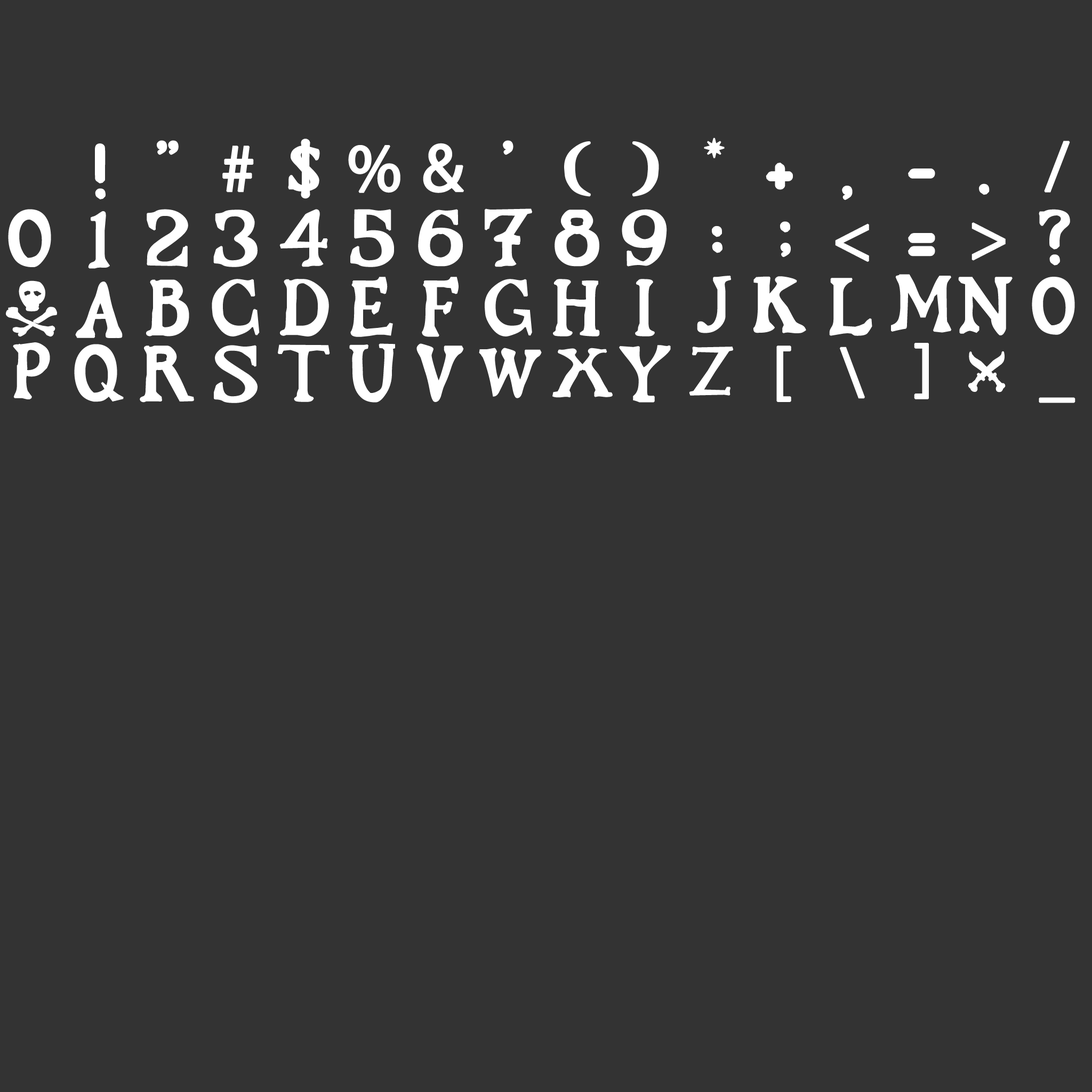
<style>
.page{position:relative;width:1092px;height:1092px;background:#333333}
.page>*{position:absolute;margin:0}
.t1{font:53.8px "Flibustier-Thin";color:#ffffff;font-weight:bold}
.t2{font:68.2px "Flibustier-Thin";color:#ffffff;font-weight:bold}
.t3{font:68.2px "MyriadPro-Regular";color:#ffffff;font-weight:bold}
.t4{font:58.7px "Flibustier-Thin";color:#ffffff;font-weight:bold}
</style>
<div class="page">
<p class="t1" style="left:704px;top:138px;width:21px;height:20px">*</p>
<p class="t2" style="left:95px;top:143px;width:11px;height:56px">!</p>
<p class="t2" style="left:157px;top:140px;width:22px;height:15px">"</p>
<p class="t3" style="left:222px;top:146px;width:32px;height:46px">#</p>
<p class="t2" style="left:288px;top:139px;width:32px;height:60px">$</p>
<p class="t3" style="left:348px;top:145px;width:52px;height:48px">%</p>
<p class="t3" style="left:423px;top:143px;width:41px;height:50px">&amp;</p>
<p class="t2" style="left:503px;top:140px;width:10px;height:15px">'</p>
<p class="t2" style="left:564px;top:141px;width:27px;height:56px">(</p>
<p class="t2" style="left:632px;top:141px;width:27px;height:56px">)</p>
<p class="t3" style="left:1044px;top:141px;width:26px;height:51px">/</p>
<p class="t2" style="left:766px;top:163px;width:27px;height:27px">+</p>
<p class="t2" style="left:908px;top:168px;width:27px;height:11px">-</p>
<p class="t2" style="left:842px;top:186px;width:11px;height:14px">,</p>
<p class="t2" style="left:979px;top:183px;width:11px;height:12px">.</p>
<p class="t2" style="left:8px;top:209px;width:43px;height:58px">0</p>
<p class="t2" style="left:147px;top:209px;width:41px;height:58px">2</p>
<p class="t2" style="left:213px;top:210px;width:45px;height:57px">3</p>
<p class="t2" style="left:279px;top:209px;width:49px;height:58px">4</p>
<p class="t2" style="left:350px;top:209px;width:44px;height:58px">5</p>
<p class="t2" style="left:418px;top:209px;width:45px;height:58px">6</p>
<p class="t2" style="left:485px;top:208px;width:47px;height:59px">7</p>
<p class="t2" style="left:555px;top:210px;width:44px;height:57px">8</p>
<p class="t2" style="left:622px;top:209px;width:45px;height:58px">9</p>
<p class="t2" style="left:1039px;top:209px;width:31px;height:57px">?</p>
<p class="t2" style="left:88px;top:211px;width:22px;height:58px">1</p>
<p class="t2" style="left:780px;top:221px;width:11px;height:36px">;</p>
<p class="t2" style="left:712px;top:226px;width:10px;height:27px">:</p>
<p class="t3" style="left:835px;top:223px;width:34px;height:39px">&lt;</p>
<p class="t2" style="left:908px;top:233px;width:27px;height:23px">=</p>
<p class="t3" style="left:971px;top:222px;width:35px;height:39px">&gt;</p>
<p class="t2" style="left:6px;top:280px;width:51px;height:57px">@</p>
<p class="t2" style="left:75px;top:282px;width:48px;height:56px">A</p>
<p class="t2" style="left:146px;top:279px;width:43px;height:57px">B</p>
<p class="t2" style="left:212px;top:279px;width:48px;height:57px">C</p>
<p class="t2" style="left:280px;top:279px;width:49px;height:57px">D</p>
<p class="t2" style="left:350px;top:277px;width:43px;height:60px">E</p>
<p class="t2" style="left:422px;top:277px;width:37px;height:60px">F</p>
<p class="t2" style="left:485px;top:279px;width:47px;height:57px">G</p>
<p class="t2" style="left:553px;top:279px;width:47px;height:57px">H</p>
<p class="t2" style="left:635px;top:279px;width:20px;height:57px">I</p>
<p class="t1" style="left:697px;top:276px;width:34px;height:57px">J</p>
<p class="t2" style="left:753px;top:276px;width:53px;height:57px">K</p>
<p class="t2" style="left:829px;top:278px;width:43px;height:58px">L</p>
<p class="t2" style="left:891px;top:274px;width:61px;height:59px">M</p>
<p class="t2" style="left:958px;top:277px;width:55px;height:58px">N</p>
<p class="t2" style="left:1032px;top:277px;width:43px;height:58px">O</p>
<p class="t2" style="left:13px;top:342px;width:37px;height:57px">P</p>
<p class="t2" style="left:74px;top:344px;width:50px;height:58px">Q</p>
<p class="t2" style="left:140px;top:346px;width:54px;height:57px">R</p>
<p class="t2" style="left:214px;top:345px;width:44px;height:58px">S</p>
<p class="t2" style="left:278px;top:344px;width:52px;height:58px">T</p>
<p class="t2" style="left:349px;top:343px;width:46px;height:60px">U</p>
<p class="t2" style="left:416px;top:343px;width:48px;height:59px">V</p>
<p class="t4" style="left:479px;top:348px;width:63px;height:50px">W</p>
<p class="t4" style="left:552px;top:348px;width:61px;height:50px">X</p>
<p class="t2" style="left:619px;top:345px;width:52px;height:58px">Y</p>
<p class="t4" style="left:689px;top:347px;width:45px;height:49px">Z</p>
<p class="t3" style="left:776px;top:346px;width:15px;height:56px">[</p>
<p class="t3" style="left:840px;top:347px;width:25px;height:52px">\</p>
<p class="t3" style="left:914px;top:343px;width:15px;height:56px">]</p>
<p class="t2" style="left:968px;top:351px;width:38px;height:41px">^</p>
<p class="t3" style="left:1039px;top:397px;width:36px;height:6px">_</p>
</div>
